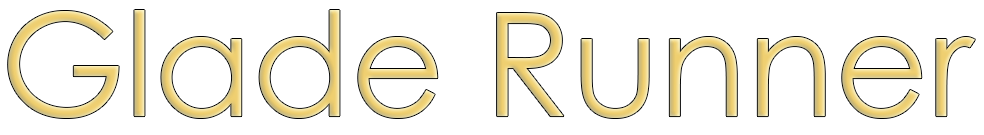
<style>
.page{position:relative;width:984px;height:135px;background:#ffffff}
.page>*{position:absolute;margin:0}
.t1{font:144px "CenturyGothic"}
</style>
<div class="page">
<p class="t1" style="left:8px;top:10px;width:967px;height:108px">Glade Runner</p>
</div>
